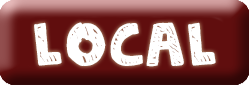
<style>
.page{position:relative;width:249px;height:85px}
.page>*{position:absolute;margin:0}
.t1{font:62.6px "DENNE|Sketchy";letter-spacing:-0.025em;color:#ffffff;scale:1.13 1}
</style>
<div class="page">
<p class="t1" style="left:34px;top:22px;width:182px;height:45px">LOCAL</p>
</div>
